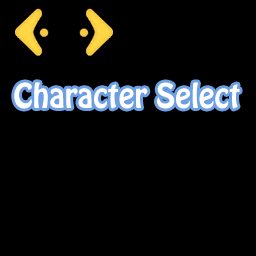
<style>
.page{position:relative;width:256px;height:256px;background:#000000}
.page>*{position:absolute;margin:0}
.t1{font:30px "HoboStd";color:#ffffff}
</style>
<div class="page">
<p class="t1" style="left:14px;top:82px;width:226px;height:27px">Character Select</p>
</div>
